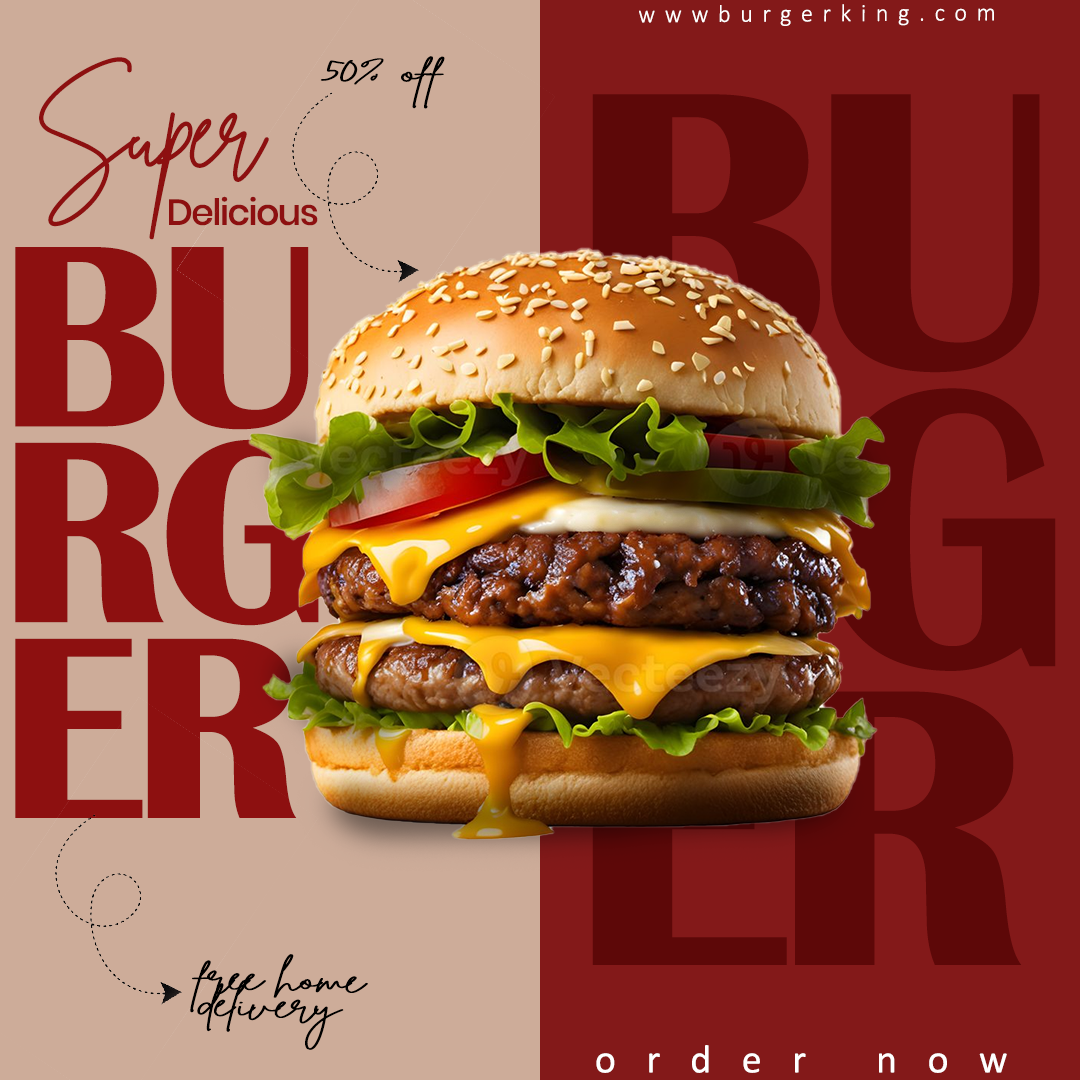
<style>
.page{position:relative;width:1080px;height:1080px;background:#cdac99}
.page>*{position:absolute;margin:0}
.t1{font:24.8px "Calibri-Light";letter-spacing:0.4em;color:#ffffff}
.t2{font:108.4px "BrittanySignatureRegular";letter-spacing:-0.04em;color:#8d1010}
.t3{font:37.2px "BrittanySignatureRegular";letter-spacing:-0.04em;color:#000000;scale:1.64 1}
.t4{font:36.1px "Poppins-Medium";letter-spacing:-0.04em;color:#8d1010}
.t5{font:268.8px/195.8px "BritannicBold";letter-spacing:-0.04em;color:#8d1010}
.t6{font:37.2px/27.1px "BrittanySignatureRegular";letter-spacing:-0.04em;color:#000000;scale:1.64 1}
.t7{font:40.1px "Calibri";letter-spacing:0.76em;color:#ffffff}
</style>
<div class="page">
<p class="t1" style="left:639px;top:4px;width:355px;height:22px">wwwburgerking.com</p>
<p class="t2" style="left:39px;top:57px;width:230px;height:183px">Super</p>
<p class="t3" style="left:320px;top:56px;width:125px;height:53px;rotate:2deg">50% off</p>
<p class="t4" style="left:169px;top:196px;width:149px;height:30px">Delicious</p>
<p class="t5" style="left:15px;top:247px;width:304px;height:571px">BU<br>RG<br>ER</p>
<p class="t6" style="left:190px;top:954px;width:178px;height:96px;rotate:2deg">free home<br>delivery</p>
<p class="t7" style="left:596px;top:1045px;width:411px;height:28px">order now</p>
</div>
